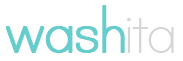
<style>
.page{position:relative;width:183px;height:61px;background:#ffffff}
.page>*{position:absolute;margin:0}
.t1{font:75px "PrintClearly";letter-spacing:-0.085em;color:#66cdcc;font-weight:bold}
.t2{font:75px "PrintClearly";letter-spacing:-0.09em;color:#d5d5d5}
</style>
<div class="page">
<p class="t1" style="left:5px;top:5px;width:120px;height:48px">wash</p>
<p class="t2" style="left:127px;top:18px;width:47px;height:35px">ita</p>
</div>
